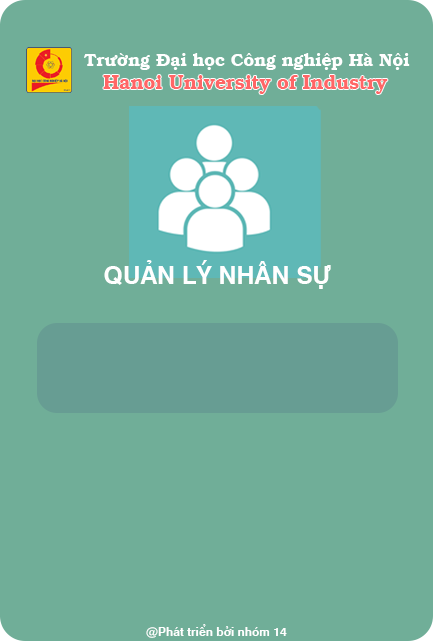
<style>
.page{position:relative;width:433px;height:641px;background:#70ae98}
.page>*{position:absolute;margin:0}
.t1{font:18px "UVNSachVoBold";color:#ffffff}
.t2{font:20px "UVNSachVoBold";color:#ff6666}
.t3{font:24.4px "UVNHongHaBold";color:#ffffff}
.t4{font:12px "UVNHongHaBold";color:#ffffff}
</style>
<div class="page">
<p class="t1" style="left:84px;top:53px;width:326px;height:17px">Trường Đại học Công nghiệp Hà Nội</p>
<p class="t2" style="left:103px;top:75px;width:285px;height:19px">Hanoi University of Industry</p>
<p class="t3" style="left:104px;top:260px;width:227px;height:29px">QUẢN LÝ NHÂN SỰ</p>
<p class="t4" style="left:146px;top:624px;width:141px;height:14px">@Phát triển bởi nhóm 14</p>
</div>
